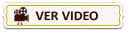
<style>
.page{position:relative;width:128px;height:32px}
.page>*{position:absolute;margin:0}
.t1{font:13.3px "Calibri-Bold";color:#3a0f07;scale:1.05 1}
</style>
<div class="page">
<p class="t1" style="left:35px;top:11px;width:64px;height:10px">VER VIDEO</p>
</div>
